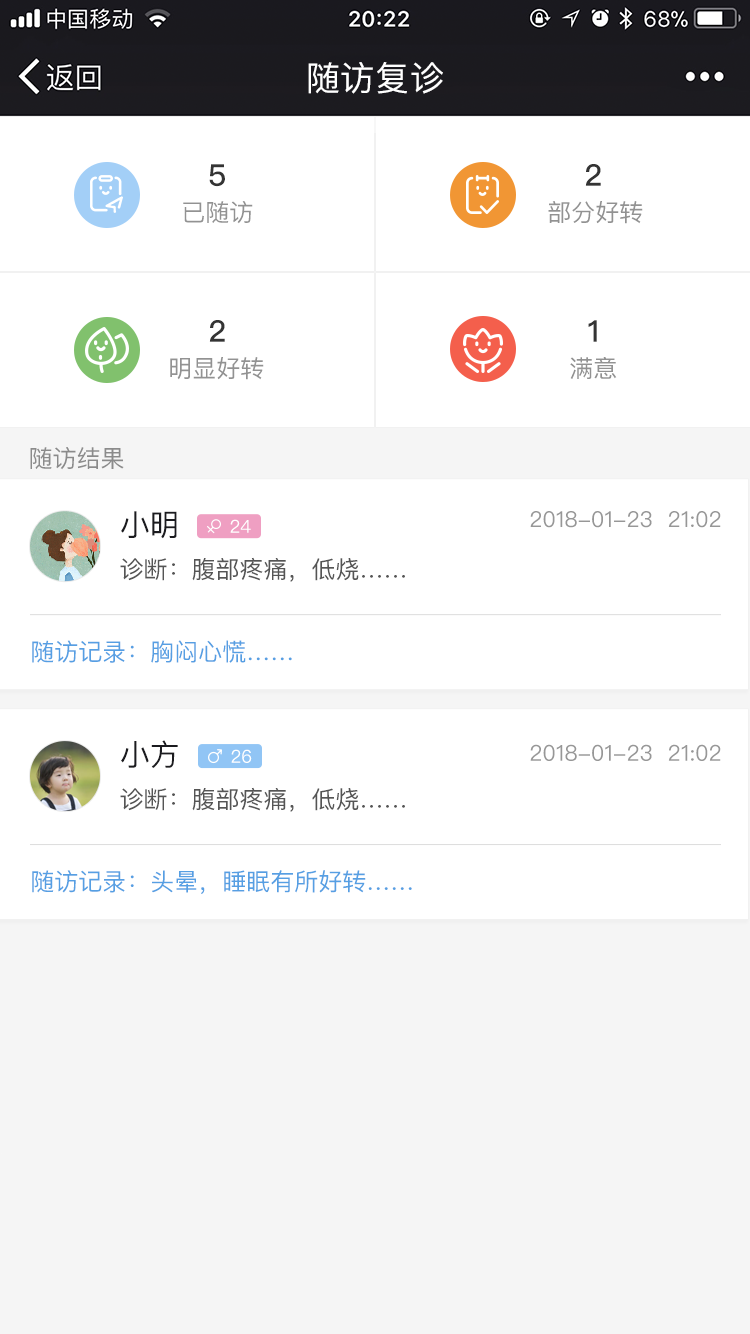
<style>
.page{position:relative;width:750px;height:1334px;background:#ffffff}
.page>*{position:absolute;margin:0}
.t1{font:34px "PingFangSC-Regular";letter-spacing:0.02em;color:#ffffff}
.t2{font:30px "PingFangSC-Medium";color:#343434}
.t3{font:24px "PingFangSC-Regular";color:#929292}
.t4{font:24px "PingFangSC-Regular";color:#8b8b8b}
.t5{font:30px "PingFangSC-Regular";color:#1b1b1f}
.t6{font:18px "PingFangSC-Regular";color:#ffffff}
.t7{font:22px "PingFangSC-Regular";color:#979797}
.t8{font:24px "PingFangSC-Regular";color:#555555}
.t9{font:24px "PingFangSC-Regular";color:#569fe3}
</style>
<div class="page">
<p class="t1" style="left:308px;top:62px;width:135px;height:32px">随访复诊</p>
<p class="t2" style="left:209px;top:164px;width:16px;height:23px">5</p>
<p class="t2" style="left:585px;top:164px;width:16px;height:22px">2</p>
<p class="t3" style="left:183px;top:201px;width:70px;height:23px">已随访</p>
<p class="t3" style="left:548px;top:201px;width:95px;height:23px">部分好转</p>
<p class="t2" style="left:209px;top:320px;width:16px;height:22px">2</p>
<p class="t2" style="left:588px;top:320px;width:9px;height:22px">1</p>
<p class="t3" style="left:170px;top:357px;width:94px;height:23px">明显好转</p>
<p class="t3" style="left:570px;top:357px;width:47px;height:22px">满意</p>
<p class="t4" style="left:30px;top:447px;width:94px;height:23px">随访结果</p>
<p class="t5" style="left:121px;top:511px;width:56px;height:28px">小明</p>
<p class="t6" style="left:230px;top:519px;width:21px;height:14px">24</p>
<p class="t7" style="left:530px;top:511px;width:191px;height:17px">2018-01-23  21:02</p>
<p class="t8" style="left:120px;top:557px;width:285px;height:25px">诊断：腹部疼痛，低烧……</p>
<p class="t9" style="left:32px;top:640px;width:260px;height:23px">随访记录：胸闷心慌……</p>
<p class="t5" style="left:121px;top:740px;width:57px;height:28px">小方</p>
<p class="t6" style="left:231px;top:749px;width:21px;height:14px">26</p>
<p class="t7" style="left:530px;top:744px;width:191px;height:17px">2018-01-23  21:02</p>
<p class="t8" style="left:120px;top:787px;width:285px;height:25px">诊断：腹部疼痛，低烧……</p>
<p class="t9" style="left:32px;top:870px;width:380px;height:24px">随访记录：头晕，睡眠有所好转……</p>
</div>
